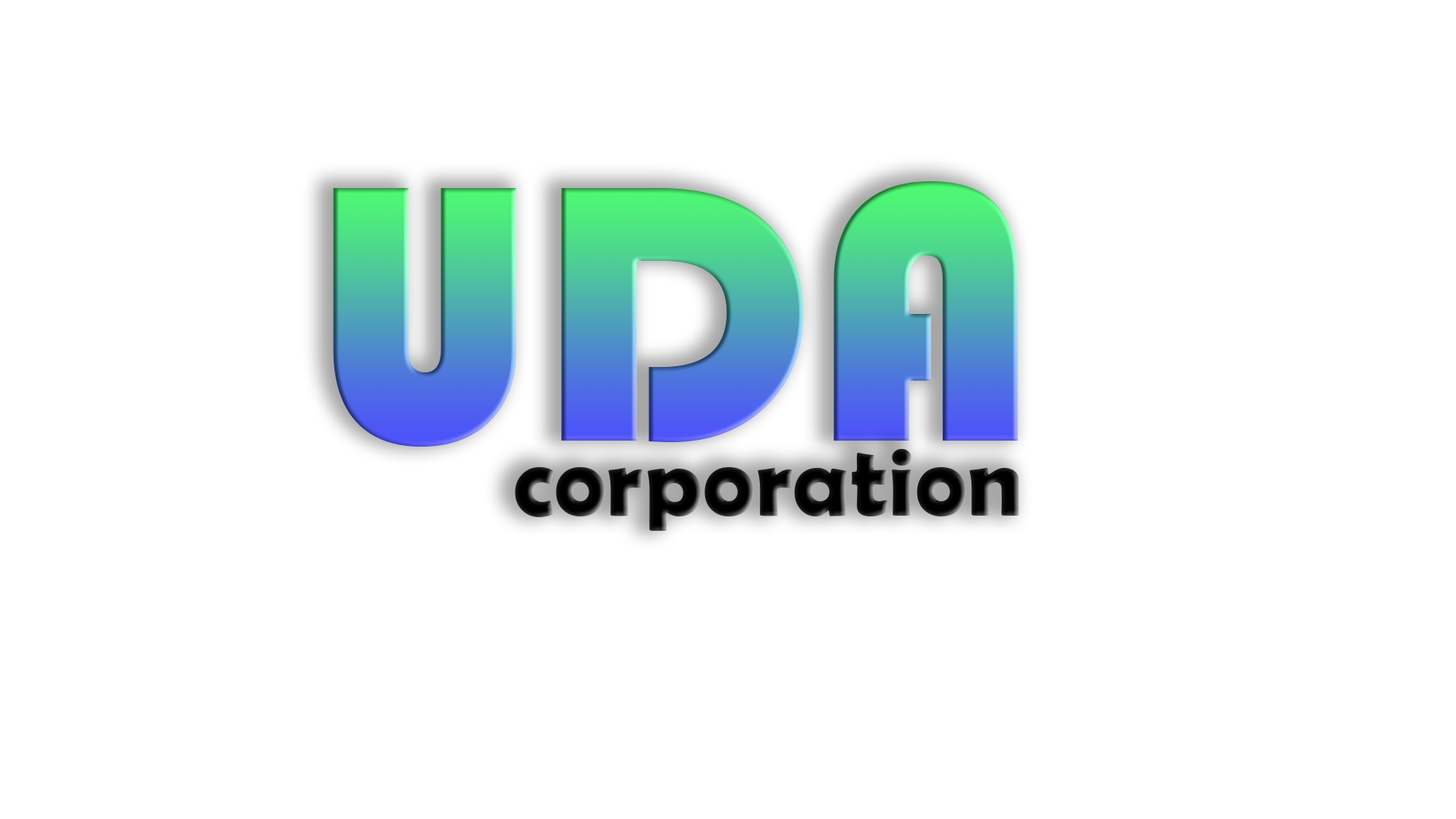
<style>
.page{position:relative;width:1456px;height:819px;background:#ffffff}
.page>*{position:absolute;margin:0}
.t1{font:379.2px "Bauhaus93"}
.t2{font:98.6px "BerlinSansFBDemi-Bold";color:#000000}
</style>
<div class="page">
<p class="t1" style="left:333px;top:181px;width:685px;height:266px">UDA</p>
<p class="t2" style="left:515px;top:449px;width:504px;height:82px">corporation</p>
</div>
